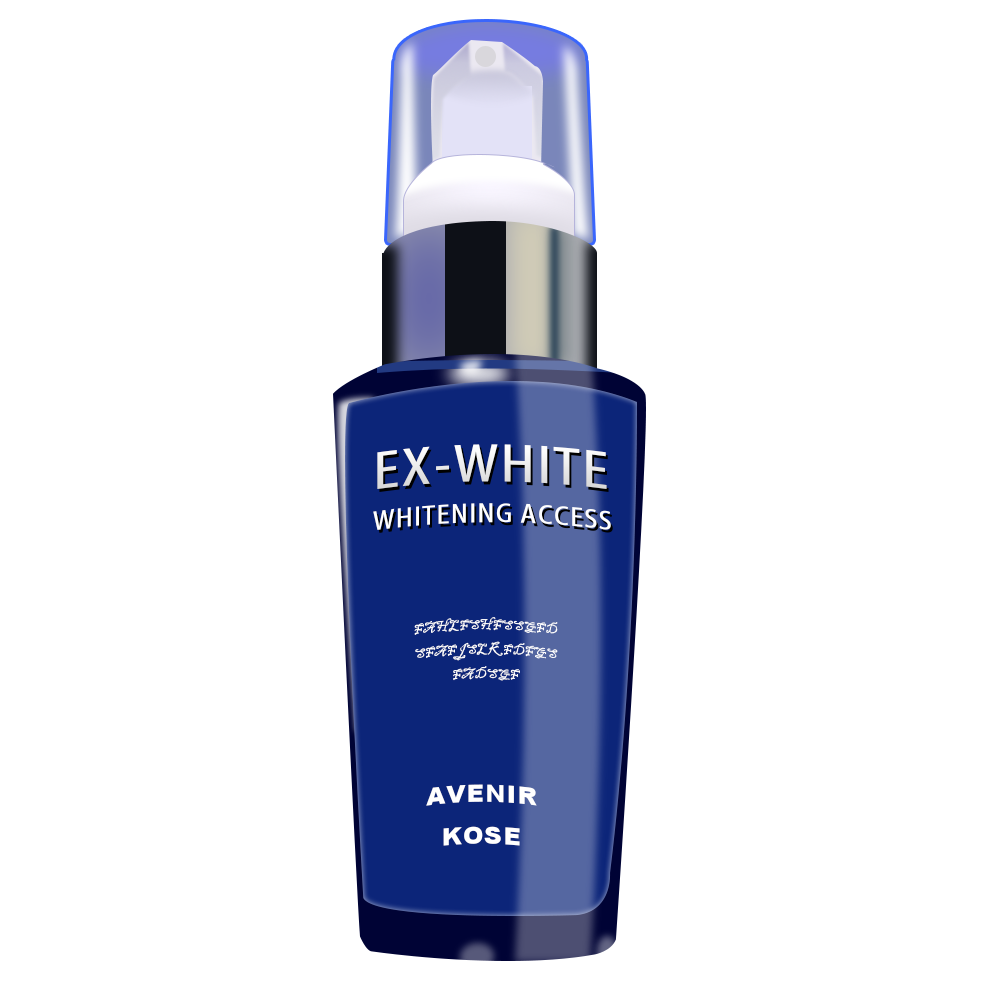
<style>
.page{position:relative;width:1000px;height:1000px;background:#ffffff}
.page>*{position:absolute;margin:0}
.t1{font:48px "AdobeHeitiStd-Regular";letter-spacing:0.06em;color:#ffffff}
.t2{font:24px "AdobeHeitiStd-Regular";letter-spacing:0.06em;color:#ffffff}
.t3{font:14px "BlackadderITC-Regular";letter-spacing:0.06em;color:#ffffff}
.t4{font:24px "Arial-Black";letter-spacing:0.06em;color:#ffffff}
</style>
<div class="page">
<p class="t1" style="left:377px;top:444px;width:230px;height:45px">EX-WHITE</p>
<p class="t2" style="left:373px;top:503px;width:238px;height:27px">WHITENING ACCESS</p>
<p class="t3" style="left:414px;top:617px;width:144px;height:64px;text-align:center">FAHLFSHFSSGFD<br>SFAFJSLKFDFGS<br>FADSGF</p>
<p class="t4" style="left:426px;top:784px;width:111px;height:62px;text-align:center">AVENIR<br>KOSE</p>
</div>
